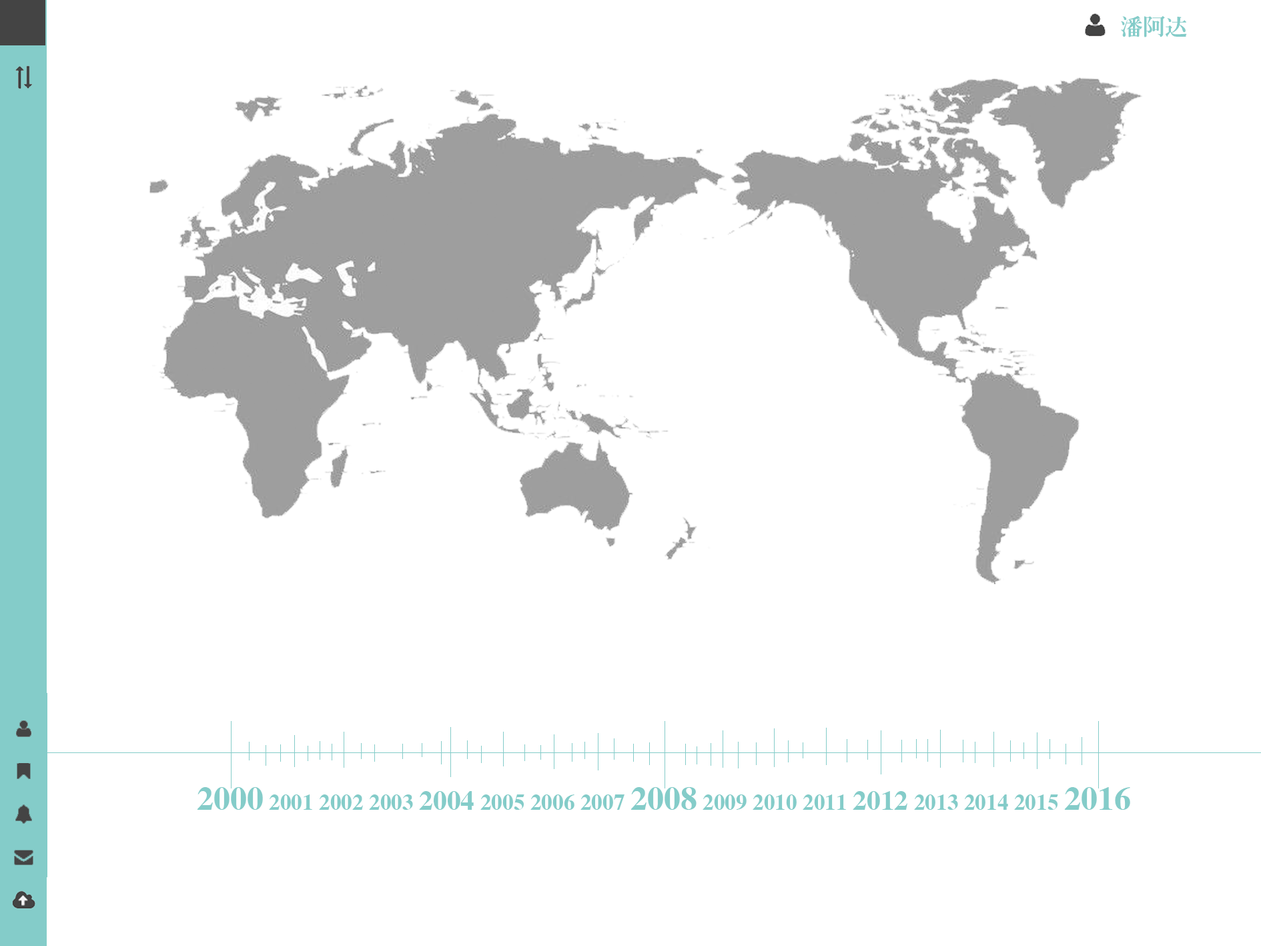
<style>
.page{position:relative;width:1261px;height:946px;background:#ffffff}
.page>*{position:absolute;margin:0}
.t1{font:22.2px "JQLaoSongJT";color:#84ccc9}
.t2{font:33.4px "JQLaoSongJT";color:#84ccc9}
.t3{font:27.8px "JQLaoSongJT";color:#84ccc9}
</style>
<div class="page">
<p class="t1" style="left:1121px;top:16px;width:66px;height:21px">潘阿达</p>
<p class="t1" style="left:197px;top:787px;width:933px;height:22px"><span class="t2">2000</span> 2001 2002 2003 <span class="t3">2004</span> 2005 2006 2007 <span class="t2">2008</span> 2009 2010 2011 <span class="t3">2012</span> 2013 2014 2015 <span class="t2">2016</span></p>
</div>
